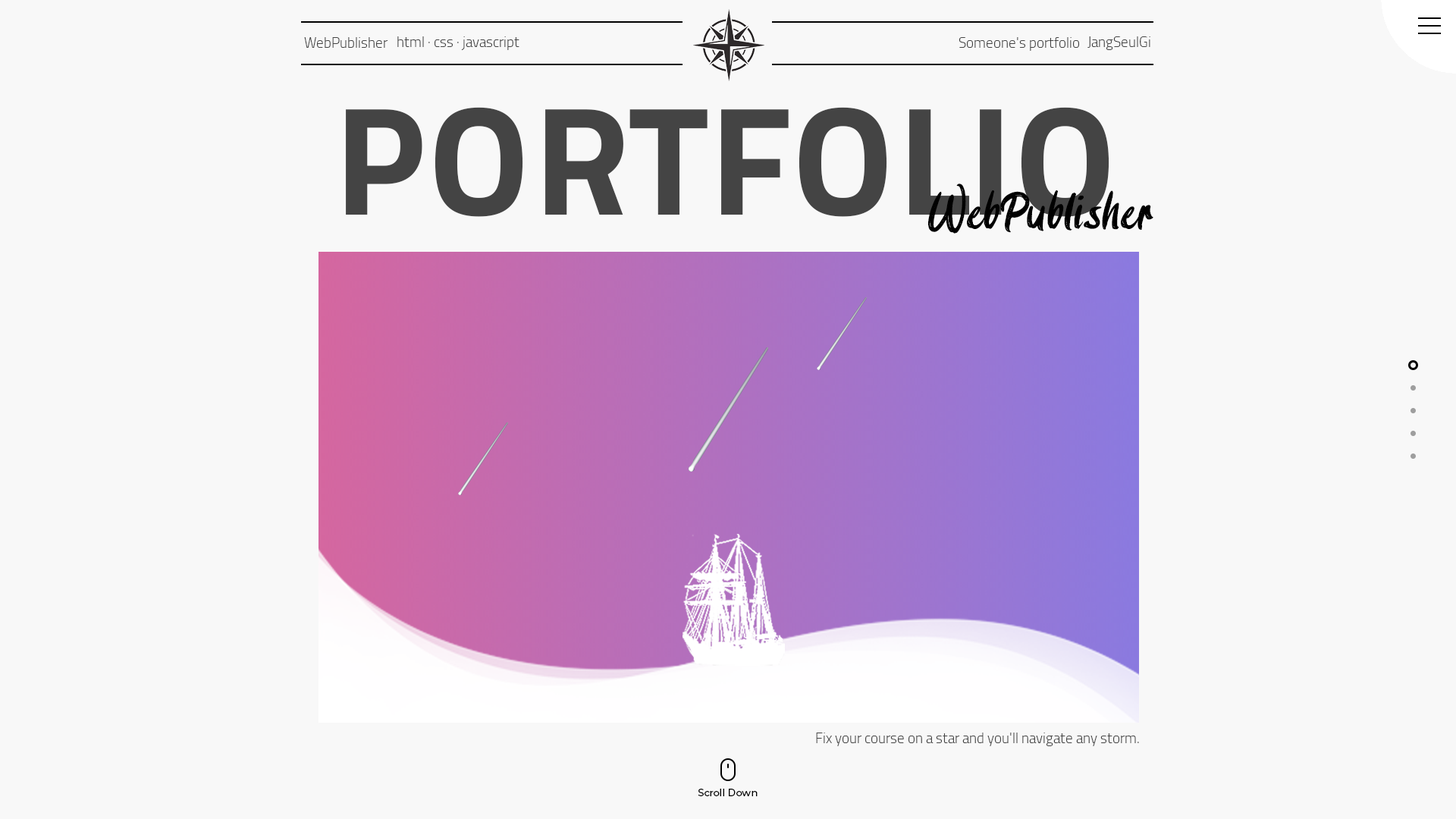
<style>
.page{position:relative;width:1456px;height:819px;background:#f8f8f8}
.page>*{position:absolute;margin:0}
.t1{font:14.4px "Cairo-Light";color:#444444}
.t2{font:154.7px "Cairo-Bold";color:#444444}
.t3{font:53.1px "Cabron";color:#000000}
.t4{font:9.9px "Montserrat-Medium";color:#000000}
</style>
<div class="page">
<p class="t1" style="left:304px;top:37px;width:84px;height:11px">WebPublisher</p>
<p class="t1" style="left:397px;top:36px;width:122px;height:14px">html · css · javascript</p>
<p class="t1" style="left:959px;top:37px;width:121px;height:14px">Someone's portfolio</p>
<p class="t1" style="left:1087px;top:36px;width:63px;height:14px">JangSeulGi</p>
<p class="t2" style="left:346px;top:107px;width:763px;height:110px">PORTFOLIO</p>
<p class="t3" style="left:928px;top:184px;width:225px;height:50px">WebPublisher</p>
<p class="t1" style="left:816px;top:733px;width:323px;height:13px">Fix your course on a star and you'll navigate any storm.</p>
<p class="t4" style="left:698px;top:789px;width:60px;height:7px">Scroll Down</p>
</div>
